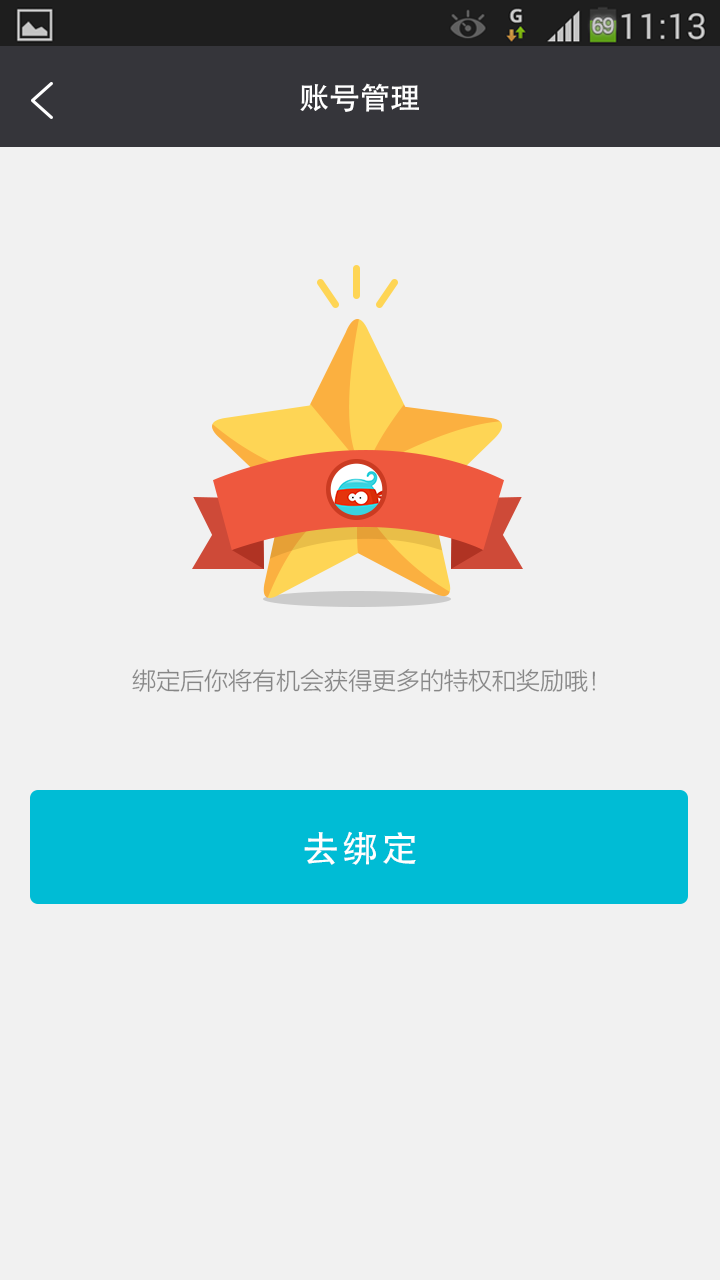
<style>
.page{position:relative;width:720px;height:1280px;background:#f1f1f1}
.page>*{position:absolute;margin:0}
.t1{font:30px "AdobeHeitiStd-Regular";color:#ffffff}
.t2{font:24px "FZLTXHK--GBK1-0";color:#868686}
.t3{font:36px "FZHTJW--GB1-0";letter-spacing:0.1em;color:#ffffff}
</style>
<div class="page">
<p class="t1" style="left:300px;top:83px;width:119px;height:29px">账号管理</p>
<p class="t2" style="left:132px;top:668px;width:463px;height:24px">绑定后你将有机会获得更多的特权和奖励哦！</p>
<p class="t3" style="left:304px;top:831px;width:112px;height:34px">去绑定</p>
</div>
